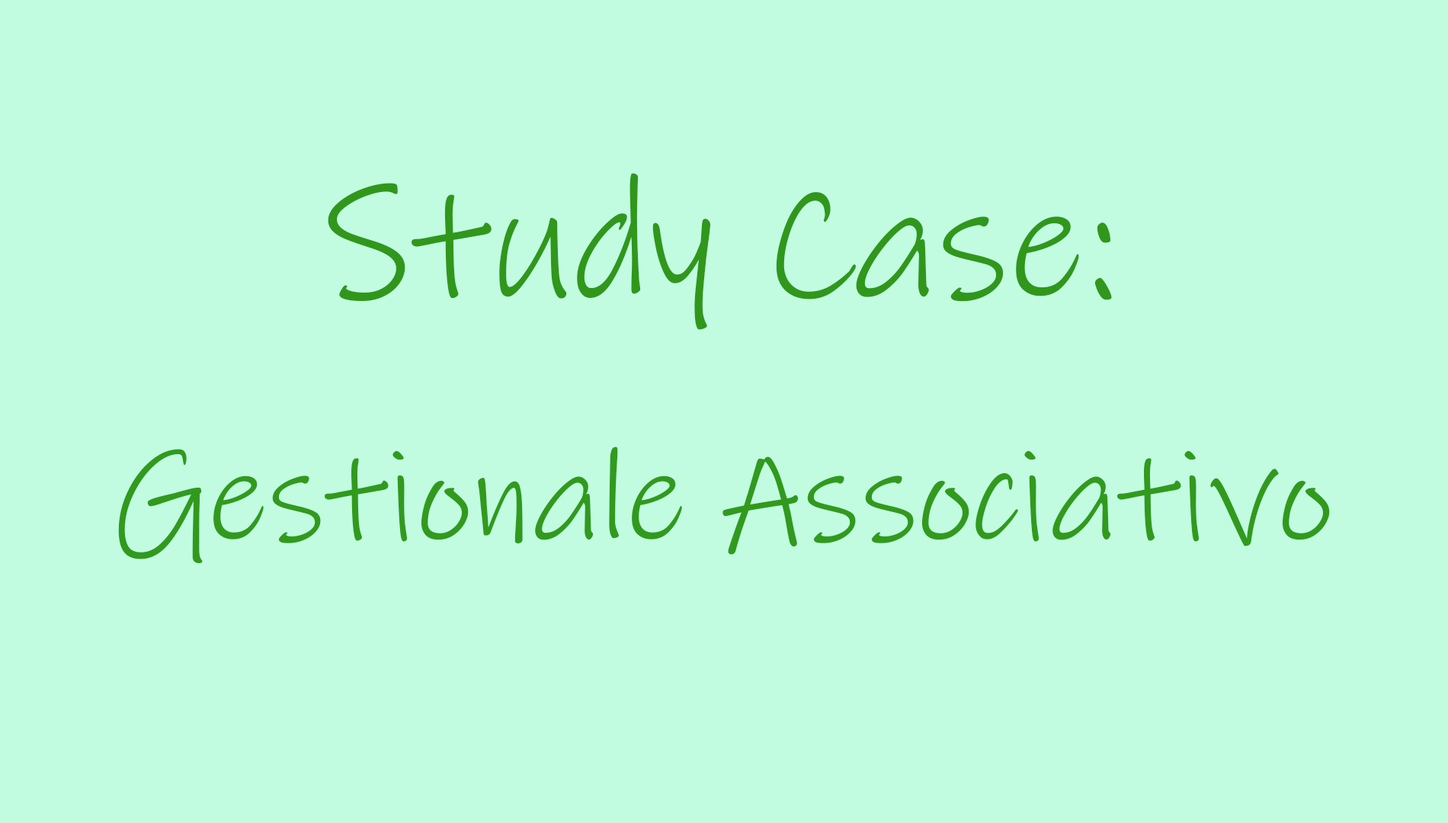
<style>
.page{position:relative;width:1448px;height:823px;background:#c1fce1}
.page>*{position:absolute;margin:0}
.t1{font:161.4px "InkFree";color:#30971b}
.t2{font:129.1px "InkFree";color:#319a1c}
</style>
<div class="page">
<p class="t1" style="left:328px;top:173px;width:784px;height:157px">Study Case:</p>
<p class="t2" style="left:118px;top:447px;width:1212px;height:117px">Gestionale Associativo</p>
</div>
